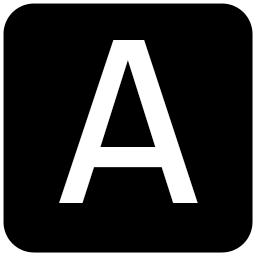
<style>
.page{position:relative;width:256px;height:256px;background:#000000}
.page>*{position:absolute;margin:0}
.t1{font:256px "Consolas";color:#ffffff}
</style>
<div class="page">
<p class="t1" style="left:59px;top:40px;width:139px;height:163px">A</p>
</div>
